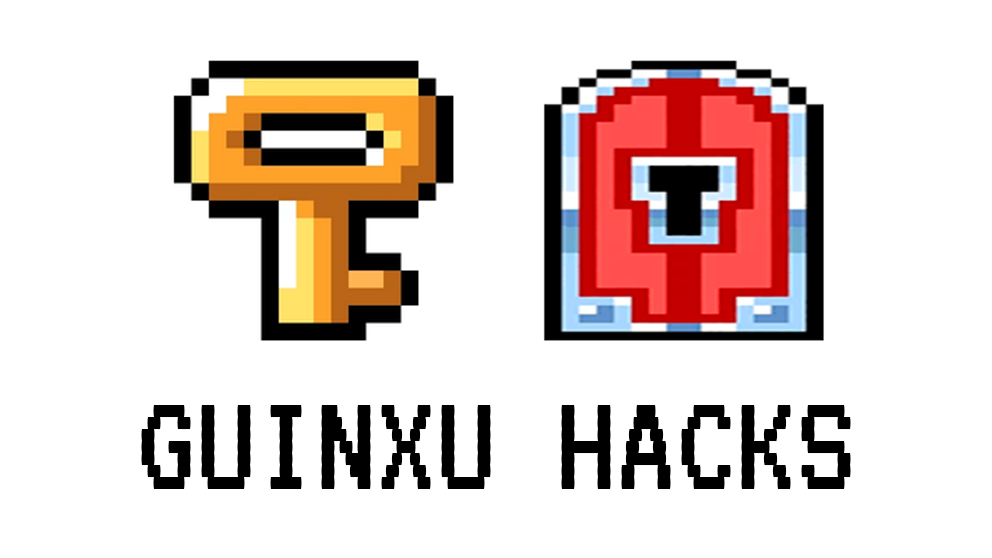
<style>
.page{position:relative;width:992px;height:558px;background:#ffffff}
.page>*{position:absolute;margin:0}
.t1{font:150px "VT323-Regular";color:#000000}
</style>
<div class="page">
<p class="t1" style="left:141px;top:405px;width:710px;height:84px">GUINXU HACKS</p>
</div>
